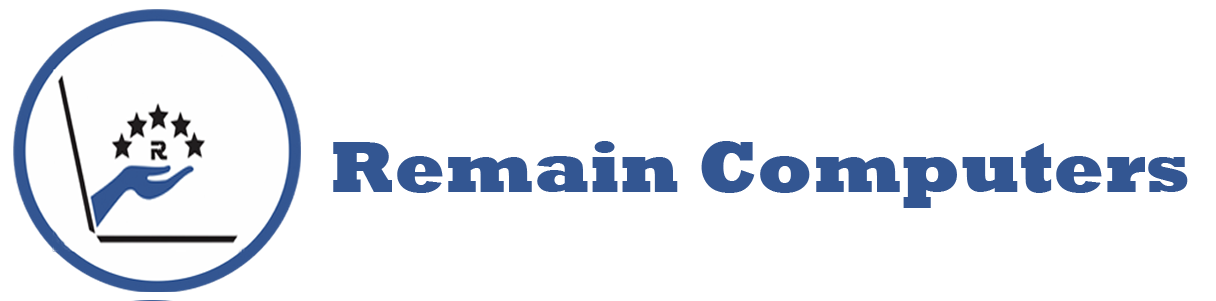
<style>
.page{position:relative;width:1216px;height:301px;background:#ffffff}
.page>*{position:absolute;margin:0}
.t1{font:74.1px "Rockwell-ExtraBold";color:#335692}
</style>
<div class="page">
<p class="t1" style="left:333px;top:141px;width:855px;height:67px">Remain Computers</p>
</div>
